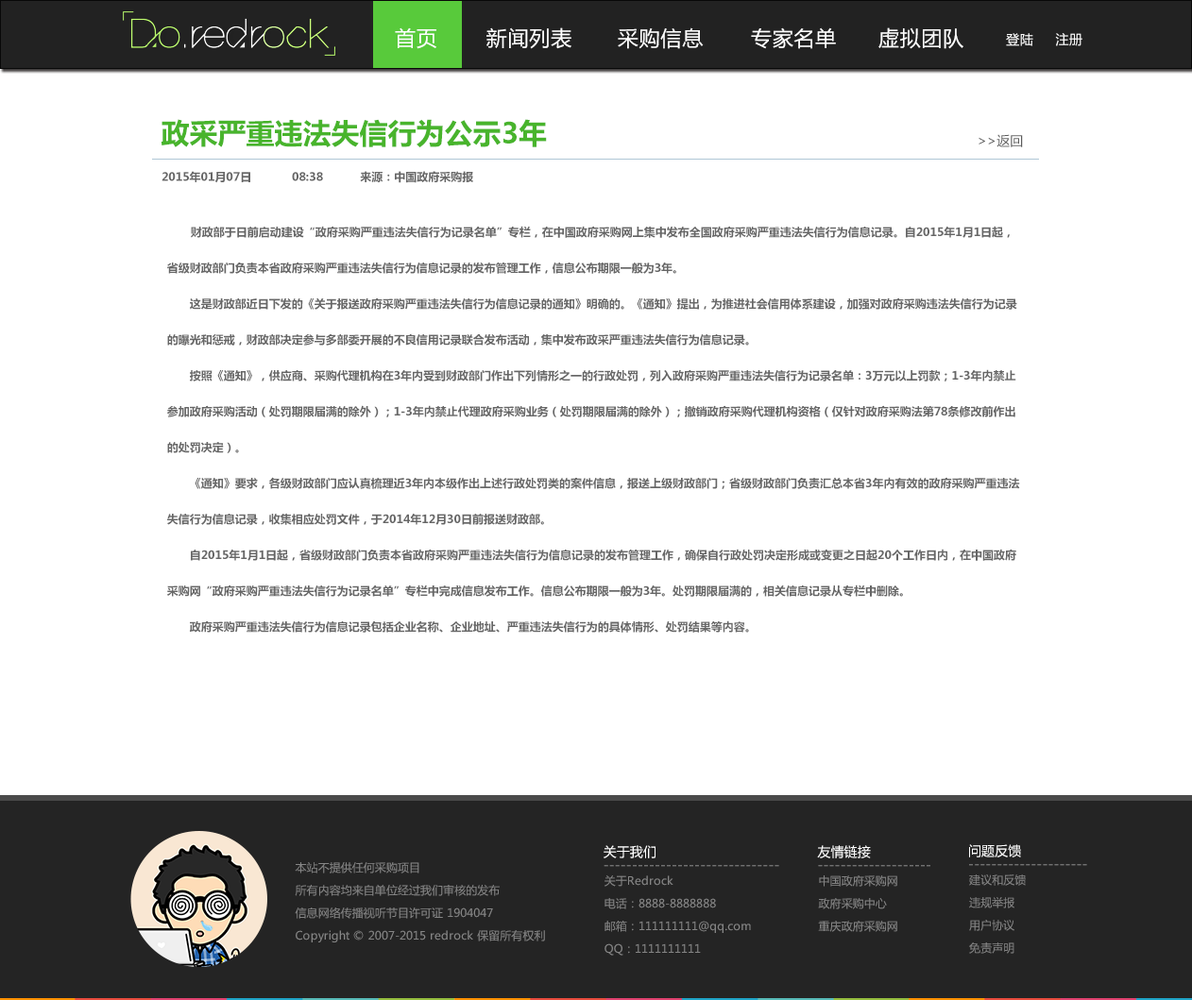
<style>
.page{position:relative;width:1192px;height:1000px;background:#ffffff}
.page>*{position:absolute;margin:0}
.t1{font:20.8px "MicrosoftYaHei";letter-spacing:0.035em;color:#ffffff}
.t2{font:13.2px "MicrosoftYaHei";letter-spacing:0.035em;color:#ffffff}
.t3{font:28.3px "MicrosoftYaHei-Bold";color:#48b42c}
.t4{font:13.2px "MicrosoftYaHei";color:#5b5b5b}
.t5{font:11.3px "MicrosoftYaHei-Bold";color:#666666}
.t6{font:11.3px/35.9px "MicrosoftYaHei-Bold";color:#666666}
.t7{font:13.2px "MicrosoftYaHei";color:#ffffff}
.t8{font:11.3px/22.7px "MicrosoftYaHei";color:#858585}
.t9{font:13.2px "MicrosoftYaHei";color:#858585}
</style>
<div class="page">
<p class="t1" style="left:395px;top:27px;width:41px;height:22px">首页</p>
<p class="t1" style="left:486px;top:27px;width:85px;height:22px">新闻列表</p>
<p class="t1" style="left:618px;top:27px;width:86px;height:22px">采购信息</p>
<p class="t1" style="left:751px;top:27px;width:85px;height:22px">专家名单</p>
<p class="t1" style="left:878px;top:27px;width:85px;height:22px">虚拟团队</p>
<p class="t2" style="left:1006px;top:33px;width:76px;height:13px">登陆     注册</p>
<p class="t3" style="left:161px;top:119px;width:386px;height:28px">政采严重违法失信行为公示3年</p>
<p class="t4" style="left:979px;top:134px;width:44px;height:13px">&gt;&gt;返回</p>
<p class="t5" style="left:162px;top:171px;width:311px;height:12px">2015年01月07日            08:38           来源：中国政府采购报</p>
<p class="t6" style="left:167px;top:226px;width:853px;height:407px">财政部于日前启动建设“政府采购严重违法失信行为记录名单”专栏，在中国政府采购网上集中发布全国政府采购严重违法失信行为信息记录。自2015年1月1日起，<br>省级财政部门负责本省政府采购严重违法失信行为信息记录的发布管理工作，信息公布期限一般为3年。<br>　　这是财政部近日下发的《关于报送政府采购严重违法失信行为信息记录的通知》明确的。《通知》提出，为推进社会信用体系建设，加强对政府采购违法失信行为记录<br>的曝光和惩戒，财政部决定参与多部委开展的不良信用记录联合发布活动，集中发布政采严重违法失信行为信息记录。<br>　　按照《通知》，供应商、采购代理机构在3年内受到财政部门作出下列情形之一的行政处罚，列入政府采购严重违法失信行为记录名单：3万元以上罚款；1-3年内禁止<br>参加政府采购活动（处罚期限届满的除外）；1-3年内禁止代理政府采购业务（处罚期限届满的除外）；撤销政府采购代理机构资格（仅针对政府采购法第78条修改前作出<br>的处罚决定）。<br>　　《通知》要求，各级财政部门应认真梳理近3年内本级作出上述行政处罚类的案件信息，报送上级财政部门；省级财政部门负责汇总本省3年内有效的政府采购严重违法<br>失信行为信息记录，收集相应处罚文件，于2014年12月30日前报送财政部。<br>　　自2015年1月1日起，省级财政部门负责本省政府采购严重违法失信行为信息记录的发布管理工作，确保自行政处罚决定形成或变更之日起20个工作日内，在中国政府<br>采购网“政府采购严重违法失信行为记录名单”专栏中完成信息发布工作。信息公布期限一般为3年。处罚期限届满的，相关信息记录从专栏中删除。<br>　　政府采购严重违法失信行为信息记录包括企业名称、企业地址、严重违法失信行为的具体情形、处罚结果等内容。</p>
<p class="t7" style="left:604px;top:845px;width:52px;height:14px">关于我们</p>
<p class="t7" style="left:817px;top:845px;width:54px;height:14px">友情链接</p>
<p class="t7" style="left:969px;top:844px;width:52px;height:14px">问题反馈</p>
<p class="t8" style="left:295px;top:862px;width:250px;height:81px">本站不提供任何采购项目<br>所有内容均来自单位经过我们审核的发布<br>信息网络传播视听节目许可证 1904047<br>Copyright © 2007-2015 redrock 保留所有权利</p>
<p class="t9" style="left:604px;top:865px;width:175px;height:2px">-------------------------------</p>
<p class="t9" style="left:818px;top:865px;width:112px;height:2px">--------------------</p>
<p class="t9" style="left:969px;top:864px;width:118px;height:2px">---------------------</p>
<p class="t8" style="left:605px;top:876px;width:146px;height:80px">关于Redrock<br>电话：8888-8888888<br>邮箱：111111111@qq.com<br>QQ：1111111111</p>
<p class="t8" style="left:818px;top:876px;width:79px;height:56px">中国政府采购网<br>政府采购中心<br>重庆政府采购网</p>
<p class="t8" style="left:969px;top:875px;width:57px;height:79px">建议和反馈<br>违规举报<br>用户协议<br>免责声明</p>
</div>
